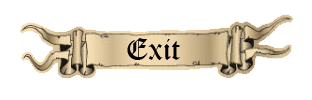
<style>
.page{position:relative;width:312px;height:100px;background:#ffffff}
.page>*{position:absolute;margin:0}
.t1{font:30px "OldEnglishTextMT";color:#000000}
</style>
<div class="page">
<p class="t1" style="left:127px;top:38px;width:53px;height:22px">Exit</p>
</div>
